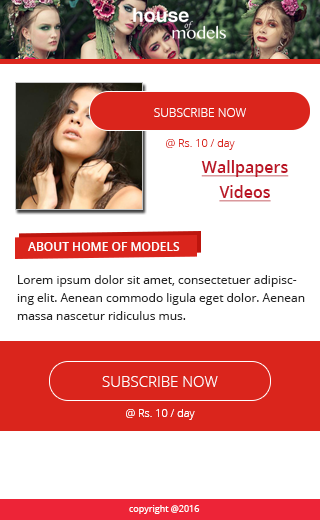
<style>
.page{position:relative;width:320px;height:520px;background:#ffffff}
.page>*{position:absolute;margin:0}
.t1{font:12px "OpenSans-Light";color:#fffefe}
.t2{font:11px "OpenSans-Light";color:#da251c}
.t3{font:16px "OpenSans-Semibold";color:#bb1626;text-decoration:underline}
.t4{font:12px "OpenSans-Semibold";color:#fffefe}
.t5{font:12px/18px "OpenSans";color:#252525}
.t6{font:15px "OpenSans-Light";color:#fffefe}
.t7{font:11px "OpenSans-Light";color:#fffefe}
.t8{font:9px "OpenSans";color:#fefefe}
</style>
<div class="page">
<p class="t1" style="left:154px;top:108px;width:92px;height:9px">SUBSCRIBE NOW</p>
<p class="t2" style="left:166px;top:139px;width:69px;height:11px">@ Rs. 10 / day</p>
<p class="t3" style="left:201px;top:160px;width:88px;height:17px">Wallpapers</p>
<p class="t3" style="left:219px;top:185px;width:52px;height:17px">Videos</p>
<p class="t4" style="left:28px;top:242px;width:152px;height:9px">ABOUT HOME OF MODELS</p>
<p class="t5" style="left:17px;top:275px;width:288px;height:45px">Lorem ipsum dolor sit amet, consectetuer adipiscing elit. Aenean commodo ligula eget dolor. Aenean massa nascetur ridiculus mus.</p>
<p class="t6" style="left:102px;top:376px;width:116px;height:11px">SUBSCRIBE NOW</p>
<p class="t7" style="left:126px;top:409px;width:69px;height:11px">@ Rs. 10 / day</p>
<p class="t8" style="left:129px;top:505px;width:71px;height:9px">copyright @2016</p>
</div>
